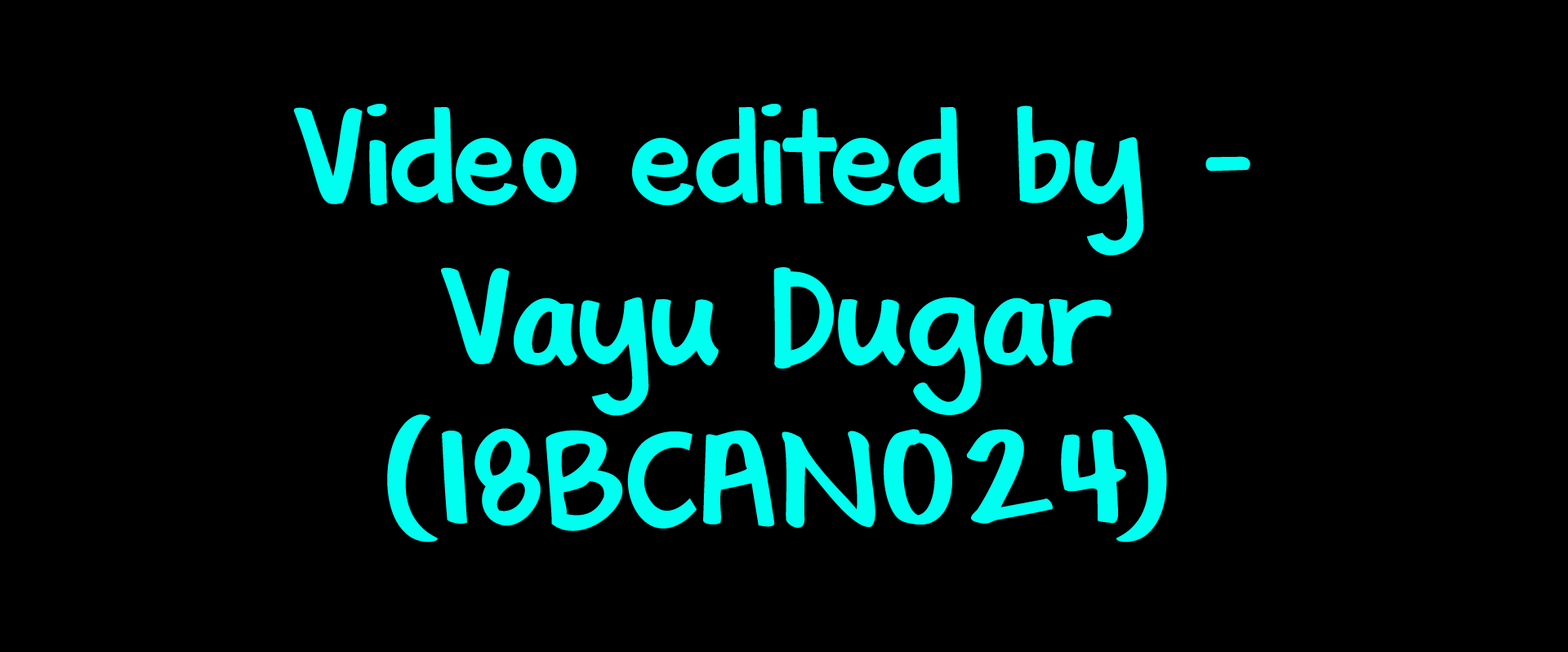
<style>
.page{position:relative;width:1568px;height:652px;background:#000000}
.page>*{position:absolute;margin:0}
.t1{font:133.4px "KGShadowoftheDay";color:#00fff0}
</style>
<div class="page">
<p class="t1" style="left:294px;top:104px;width:956px;height:438px;text-align:center">Video edited by -<br>Vayu Dugar (18BCAN024)</p>
</div>
